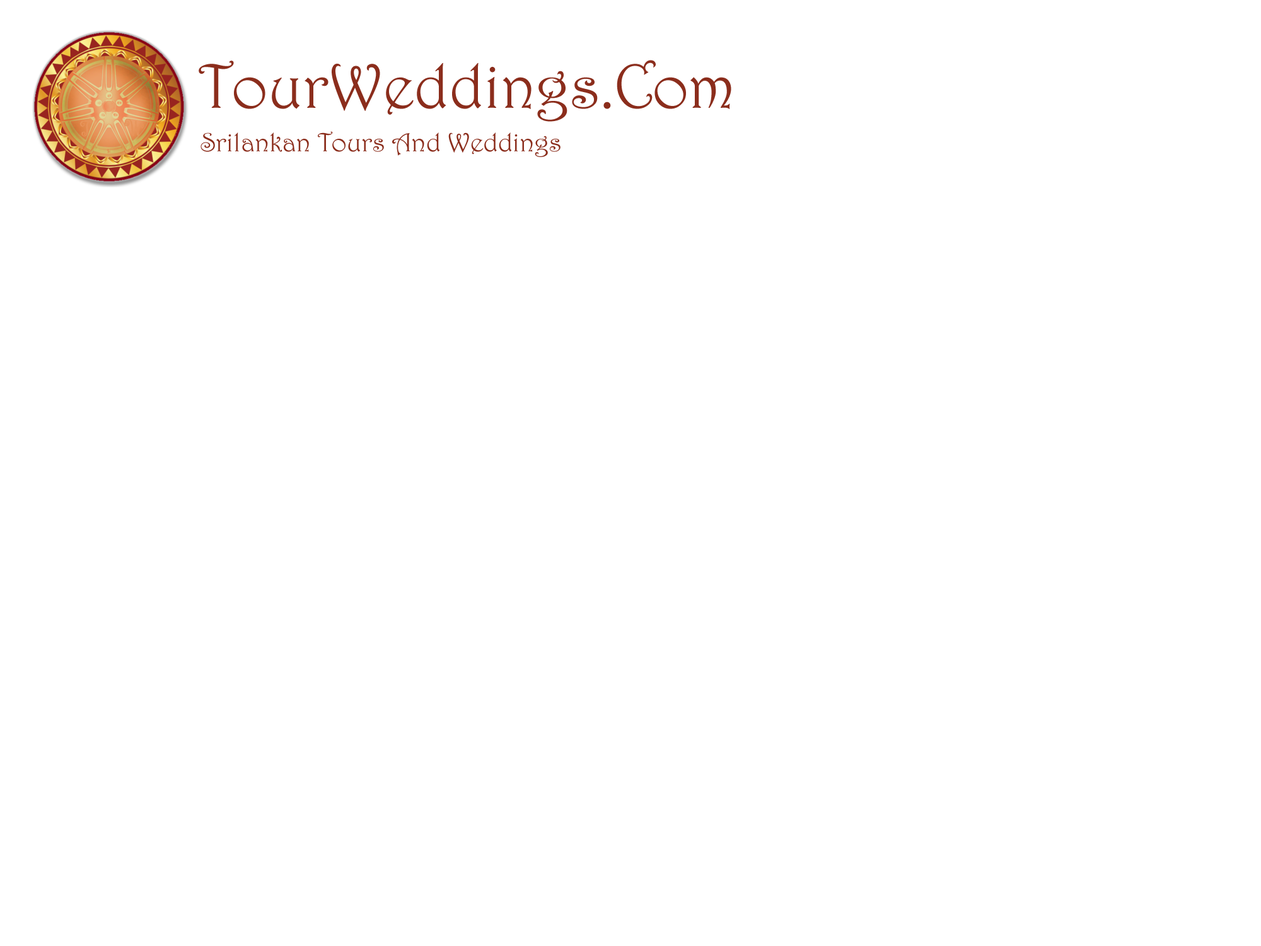
<style>
.page{position:relative;width:1261px;height:946px;background:#ffffff}
.page>*{position:absolute;margin:0}
.t1{font:63px "Harrington";color:#8b2d1c}
.t2{font:26.5px "Harrington";color:#8b2d1c}
</style>
<div class="page">
<p class="t1" style="left:199px;top:60px;width:532px;height:62px">TourWeddings.Com</p>
<p class="t2" style="left:200px;top:131px;width:360px;height:26px">Srilankan Tours And Weddings</p>
</div>
